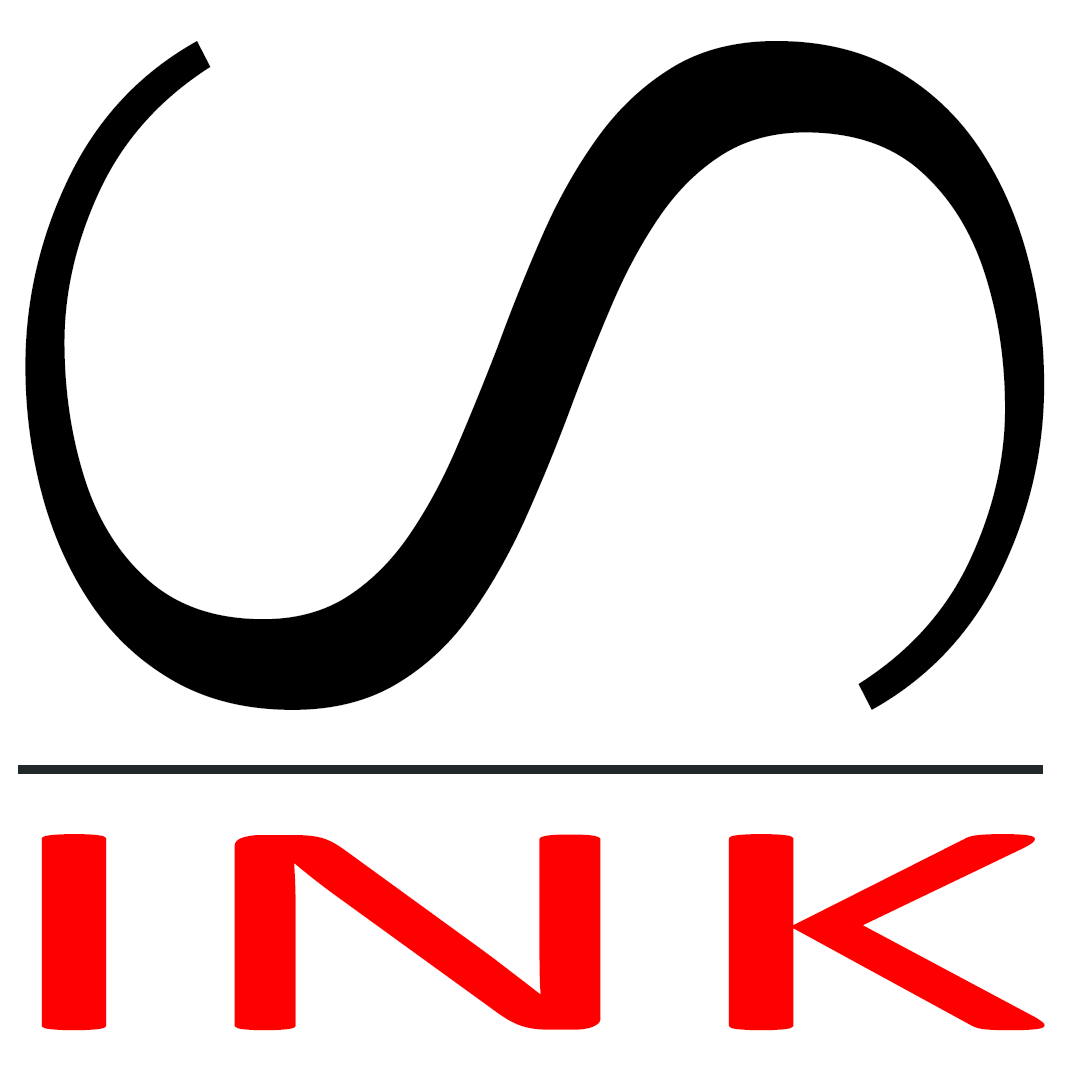
<style>
.page{position:relative;width:1080px;height:1080px;background:#ffffff}
.page>*{position:absolute;margin:0}
.t1{font:1429px "BraveEmber";color:#000000}
.t2{font:307.5px "Calibri";color:#ff0000;scale:2.49 1}
</style>
<div class="page">
<p class="t1" style="left:25px;top:41px;width:1020px;height:669px;rotate:90deg">S</p>
<p class="t2" style="left:41px;top:834px;width:1004px;height:197px">INK</p>
</div>
